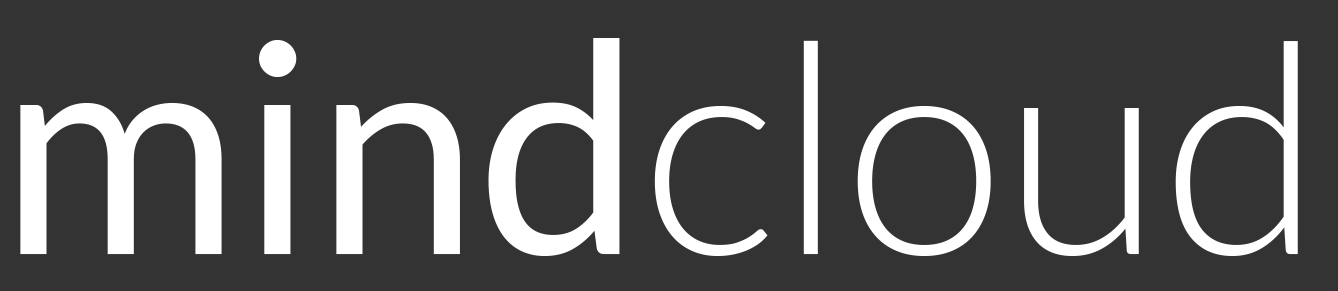
<style>
.page{position:relative;width:1338px;height:291px;background:#333333}
.page>*{position:absolute;margin:0}
.t1{font:293.3px "Lato-Light";color:#ffffff}
.t2{font:293.3px "Lato-Regular";color:#ffffff}
</style>
<div class="page">
<p class="t1" style="left:20px;top:38px;width:1278px;height:218px"><span class="t2">mind</span>cloud</p>
</div>
